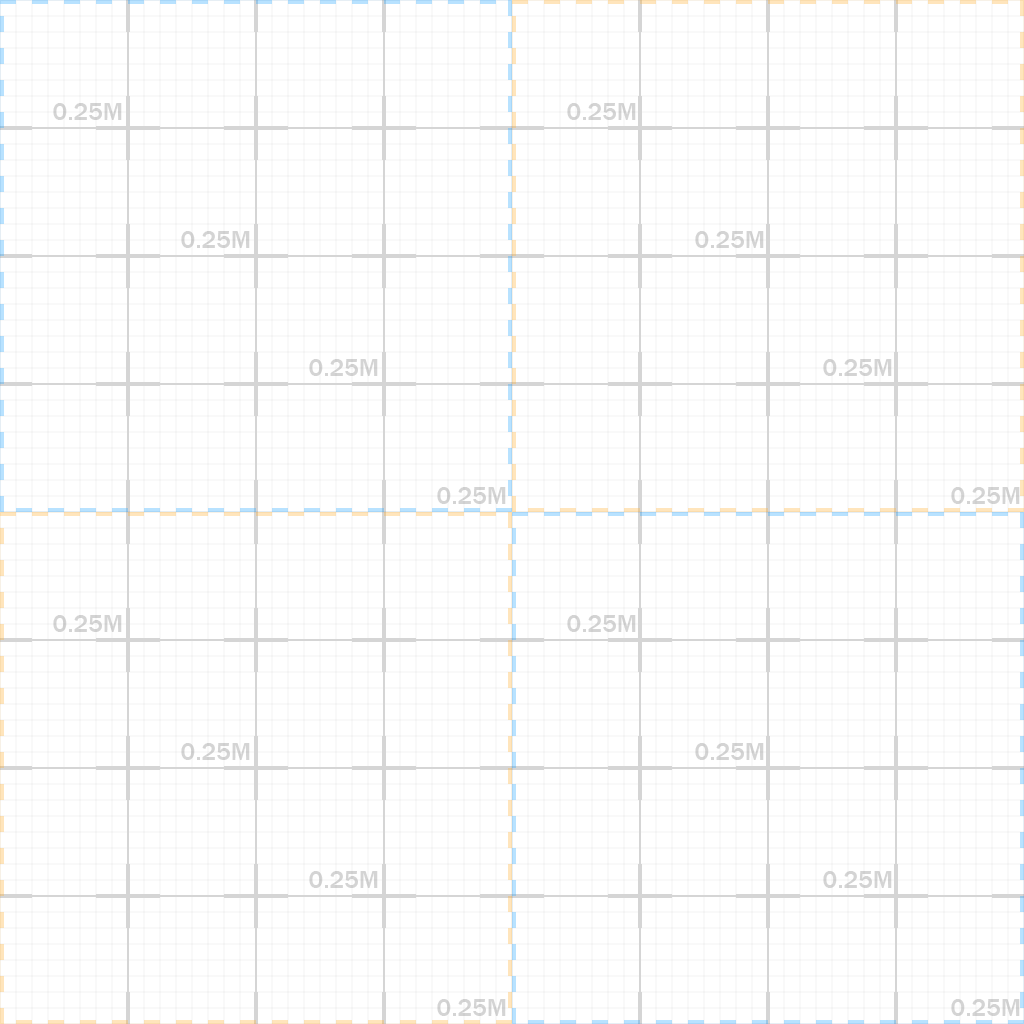
<style>
.page{position:relative;width:1024px;height:1024px;background:#ffffff}
.page>*{position:absolute;margin:0}
.t1{font:25.1px "FranklinGothic-Medium";color:#d4d4d4}
</style>
<div class="page">
<p class="t1" style="left:53px;top:103px;width:69px;height:17px">0.25M</p>
<p class="t1" style="left:567px;top:103px;width:69px;height:17px">0.25M</p>
<p class="t1" style="left:181px;top:231px;width:69px;height:17px">0.25M</p>
<p class="t1" style="left:695px;top:231px;width:69px;height:17px">0.25M</p>
<p class="t1" style="left:309px;top:359px;width:69px;height:17px">0.25M</p>
<p class="t1" style="left:823px;top:359px;width:69px;height:17px">0.25M</p>
<p class="t1" style="left:437px;top:487px;width:69px;height:17px">0.25M</p>
<p class="t1" style="left:951px;top:487px;width:69px;height:17px">0.25M</p>
<p class="t1" style="left:53px;top:615px;width:69px;height:17px">0.25M</p>
<p class="t1" style="left:567px;top:615px;width:69px;height:17px">0.25M</p>
<p class="t1" style="left:181px;top:743px;width:69px;height:17px">0.25M</p>
<p class="t1" style="left:695px;top:743px;width:69px;height:17px">0.25M</p>
<p class="t1" style="left:309px;top:871px;width:69px;height:17px">0.25M</p>
<p class="t1" style="left:823px;top:871px;width:69px;height:17px">0.25M</p>
<p class="t1" style="left:437px;top:999px;width:69px;height:17px">0.25M</p>
<p class="t1" style="left:951px;top:999px;width:69px;height:17px">0.25M</p>
</div>
